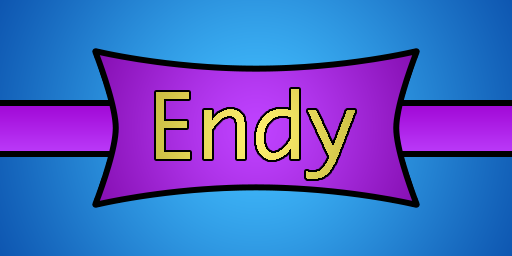
<style>
.page{position:relative;width:512px;height:256px}
.page>*{position:absolute;margin:0}
.t1{font:88.9px "MonacoThin";color:#e7d95b}
</style>
<div class="page">
<p class="t1" style="left:156px;top:89px;width:199px;height:90px">Endy</p>
</div>
